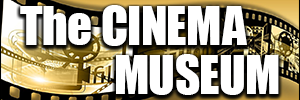
<style>
.page{position:relative;width:300px;height:100px;background:#ffffff}
.page>*{position:absolute;margin:0}
.t1{font:48.6px/48.6px "Impact";color:#ffffff}
</style>
<div class="page">
<p class="t1" style="left:20px;top:5px;width:259px;height:90px">The CINEMA<br>           MUSEUM</p>
</div>
